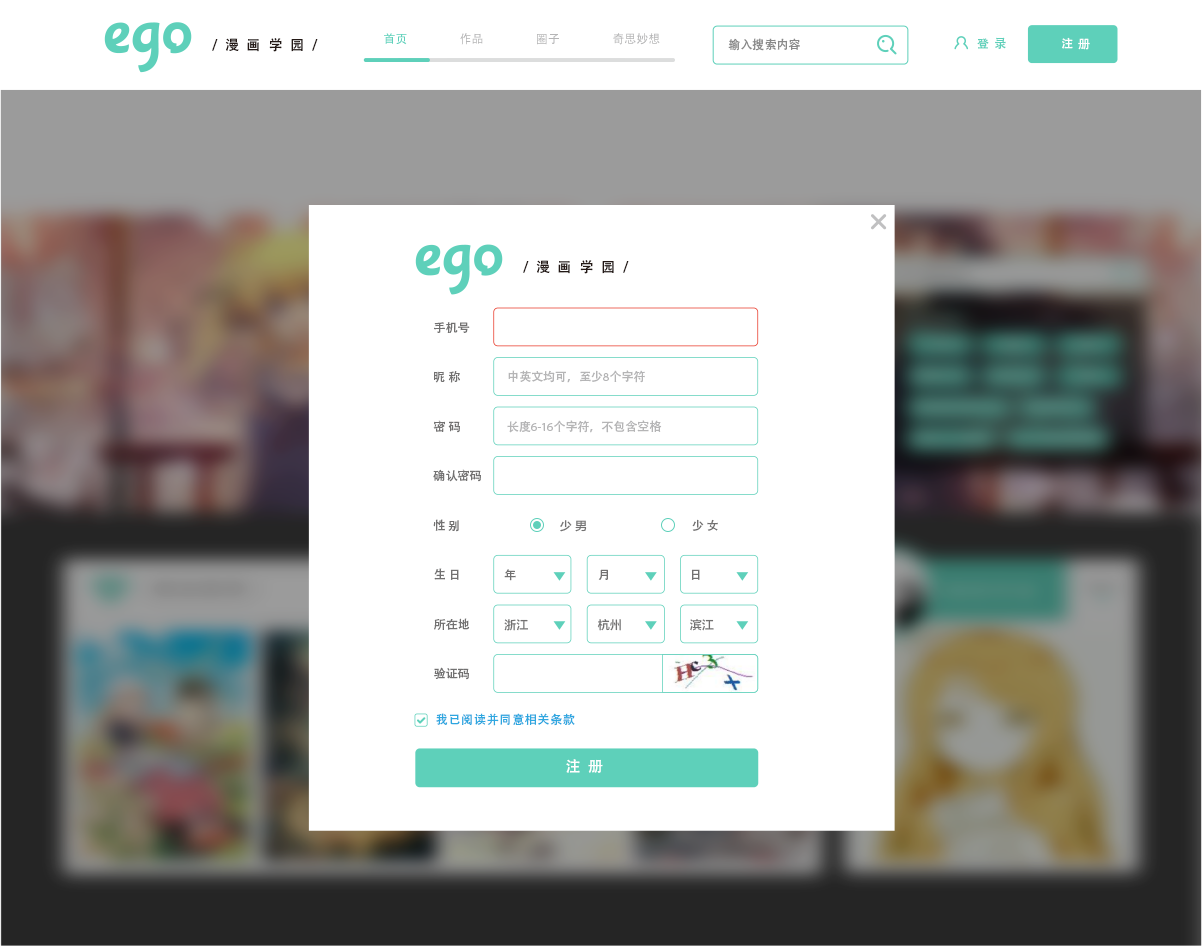
<style>
.page{position:relative;width:1202px;height:946px;background:#ffffff}
.page>*{position:absolute;margin:0}
.t1{font:14px "FZLTZHK--GBK1-0";letter-spacing:0.56em;color:#231815}
.t2{font:12px "FZLTZHK--GBK1-0";color:#898989}
.t3{font:12px "FZLTZHK--GBK1-0";color:#5ed0ba}
.t4{font:12px "FZLTZHK--GBK1-0";color:#ffffff}
.t5{font:12px "FZLTZHK--GBK1-0";color:#727171}
.t6{font:12px "HiraginoSansGB-W3";color:#b5b5b6}
.t7{font:12px "MyriadPro-Regular";color:#b5b5b6}
.t8{font:12px "FZLTZHK--GBK1-0";letter-spacing:0.06em;color:#2ea7e0}
.t9{font:15px "FZLTZHK--GBK1-0";letter-spacing:0.56em;color:#ffffff}
</style>
<div class="page">
<p class="t1" style="left:212px;top:38px;width:106px;height:14px">/漫画学园/</p>
<p class="t2" style="left:728px;top:38px;width:72px;height:13px">输入搜索内容</p>
<p class="t3" style="left:977px;top:37px;width:29px;height:12px">登  录</p>
<p class="t4" style="left:1062px;top:37px;width:28px;height:13px">注  册</p>
<p class="t1" style="left:523px;top:260px;width:106px;height:14px">/漫画学园/</p>
<p class="t5" style="left:434px;top:322px;width:36px;height:11px">手机号</p>
<p class="t5" style="left:434px;top:371px;width:26px;height:12px">昵 称</p>
<p class="t6" style="left:508px;top:370px;width:137px;height:13px">中英文均可，至少<span class="t7">8</span>个字符</p>
<p class="t5" style="left:433px;top:420px;width:27px;height:13px">密 码</p>
<p class="t6" style="left:507px;top:420px;width:155px;height:13px">长度<span class="t7">6-16</span>个字符，不包含空格</p>
<p class="t5" style="left:433px;top:469px;width:48px;height:13px">确认密码</p>
<p class="t5" style="left:433px;top:519px;width:26px;height:13px">性 别</p>
<p class="t5" style="left:560px;top:520px;width:27px;height:12px">少 男</p>
<p class="t5" style="left:692px;top:519px;width:26px;height:12px">少 女</p>
<p class="t5" style="left:434px;top:568px;width:25px;height:12px">生 日</p>
<p class="t5" style="left:504px;top:569px;width:12px;height:12px">年</p>
<p class="t5" style="left:598px;top:569px;width:10px;height:11px">月</p>
<p class="t5" style="left:691px;top:569px;width:9px;height:11px">日</p>
<p class="t5" style="left:434px;top:618px;width:36px;height:12px">所在地</p>
<p class="t5" style="left:504px;top:619px;width:24px;height:12px">浙江</p>
<p class="t5" style="left:597px;top:619px;width:24px;height:12px">杭州</p>
<p class="t5" style="left:690px;top:619px;width:24px;height:12px">滨江</p>
<p class="t5" style="left:434px;top:667px;width:35px;height:13px">验证码</p>
<p class="t8" style="left:436px;top:713px;width:139px;height:13px">我已阅读并同意相关条款</p>
<p class="t9" style="left:566px;top:759px;width:37px;height:14px">注册</p>
</div>
